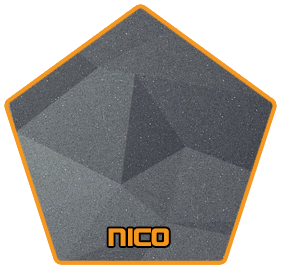
<style>
.page{position:relative;width:282px;height:270px;background:#ffffff}
.page>*{position:absolute;margin:0}
.t1{font:22px "HyundaiNormal";color:#f49720}
</style>
<div class="page">
<p class="t1" style="left:108px;top:228px;width:61px;height:18px">Nico</p>
</div>
